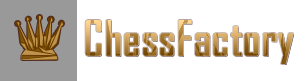
<style>
.page{position:relative;width:307px;height:81px;background:#ffffff}
.page>*{position:absolute;margin:0}
.t1{font:45.8px "AgencyFBCyrillic";font-weight:bold}
</style>
<div class="page">
<p class="t1" style="left:85px;top:20px;width:208px;height:44px">ChessFactory</p>
</div>
